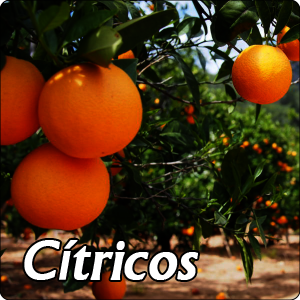
<style>
.page{position:relative;width:300px;height:300px}
.page>*{position:absolute;margin:0}
.t1{font:55.6px "Narkisim";color:#ffffff;font-weight:bold;font-style:italic}
.t2{font:55.6px "MyriadPro-Regular";color:#ffffff;font-weight:bold;font-style:italic}
</style>
<div class="page">
<p class="t1" style="left:24px;top:240px;width:174px;height:40px">C<span class="t2">í</span>tricos</p>
</div>
